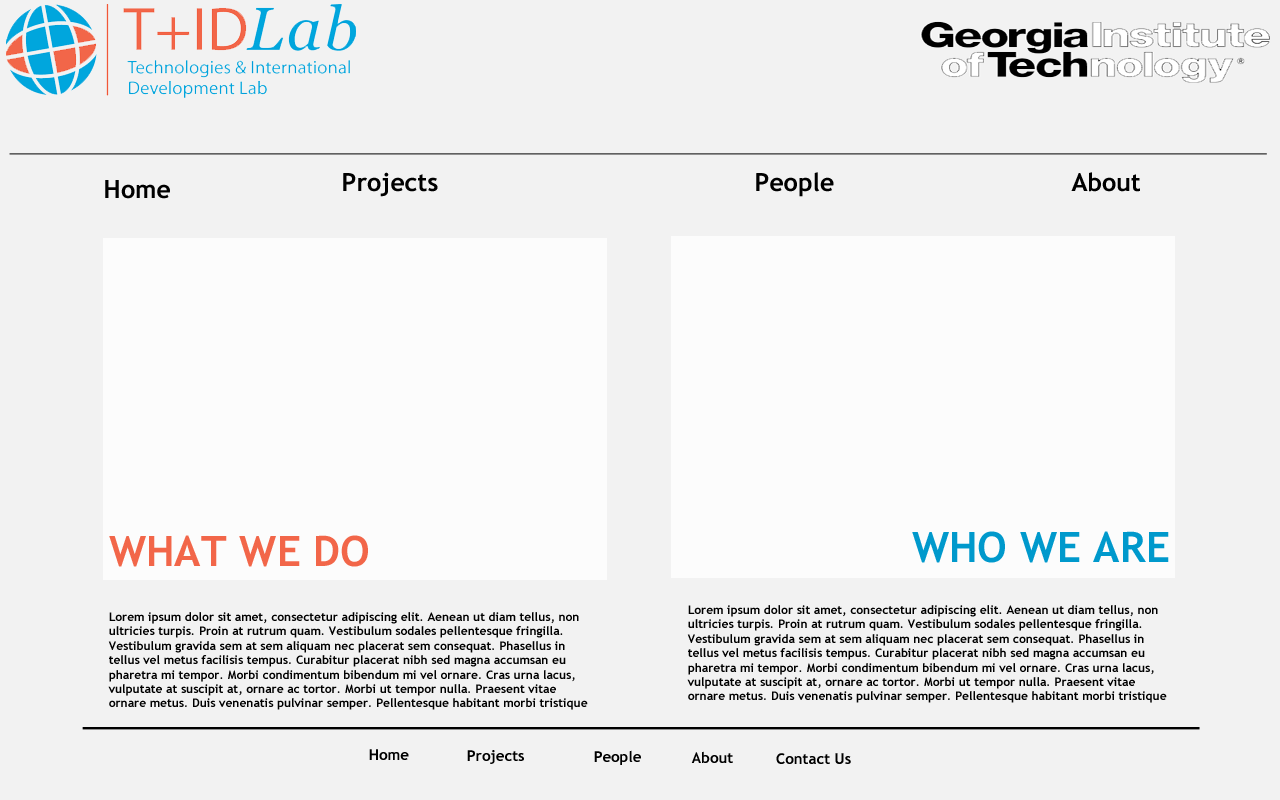
<style>
.page{position:relative;width:1280px;height:800px;background:#f2f2f2}
.page>*{position:absolute;margin:0}
.t1{font:25px "TrebuchetMS-Bold";color:#000000}
.t2{font:42px "TrebuchetMS-Bold";color:#0099cc}
.t3{font:42px "TrebuchetMS-Bold";color:#f26649}
.t4{font:12px "TrebuchetMS-Bold";color:#000000}
.t5{font:15px "TrebuchetMS-Bold";color:#000000}
</style>
<div class="page">
<p class="t1" style="left:343px;top:172px;width:95px;height:25px">Projects</p>
<p class="t1" style="left:756px;top:172px;width:78px;height:25px">People</p>
<p class="t1" style="left:1071px;top:172px;width:69px;height:20px">About</p>
<p class="t1" style="left:105px;top:180px;width:65px;height:19px">Home</p>
<p class="t2" style="left:912px;top:531px;width:257px;height:32px">WHO WE ARE</p>
<p class="t3" style="left:109px;top:535px;width:259px;height:32px">WHAT WE DO</p>
<p class="t4" style="left:687px;top:605px;width:480px;height:98px">Lorem ipsum dolor sit amet, consectetur adipiscing elit. Aenean ut diam tellus, non ultricies turpis. Proin at rutrum quam. Vestibulum sodales pellentesque fringilla. Vestibulum gravida sem at sem aliquam nec placerat sem consequat. Phasellus in tellus vel metus facilisis tempus. Curabitur placerat nibh sed magna accumsan eu pharetra mi tempor. Morbi condimentum bibendum mi vel ornare. Cras urna lacus, vulputate at suscipit at, ornare ac tortor. Morbi ut tempor nulla. Praesent vitae ornare metus. Duis venenatis pulvinar semper. Pellentesque habitant morbi tristique senectus et netus et malesuada fames ac turpis egestas. In a lectus sem. Donec eu erat ut velit tristique auctor.</p>
<p class="t4" style="left:108px;top:612px;width:480px;height:98px">Lorem ipsum dolor sit amet, consectetur adipiscing elit. Aenean ut diam tellus, non ultricies turpis. Proin at rutrum quam. Vestibulum sodales pellentesque fringilla. Vestibulum gravida sem at sem aliquam nec placerat sem consequat. Phasellus in tellus vel metus facilisis tempus. Curabitur placerat nibh sed magna accumsan eu pharetra mi tempor. Morbi condimentum bibendum mi vel ornare. Cras urna lacus, vulputate at suscipit at, ornare ac tortor. Morbi ut tempor nulla. Praesent vitae ornare metus. Duis venenatis pulvinar semper. Pellentesque habitant morbi tristique senectus et netus et malesuada fames ac turpis egestas. In a lectus sem. Donec eu erat ut velit tristique auctor.</p>
<p class="t5" style="left:369px;top:749px;width:40px;height:11px">Home</p>
<p class="t5" style="left:467px;top:750px;width:57px;height:14px">Projects</p>
<p class="t5" style="left:594px;top:750px;width:47px;height:15px">People</p>
<p class="t5" style="left:691px;top:751px;width:42px;height:12px">About</p>
<p class="t5" style="left:776px;top:753px;width:75px;height:11px">Contact Us</p>
</div>
